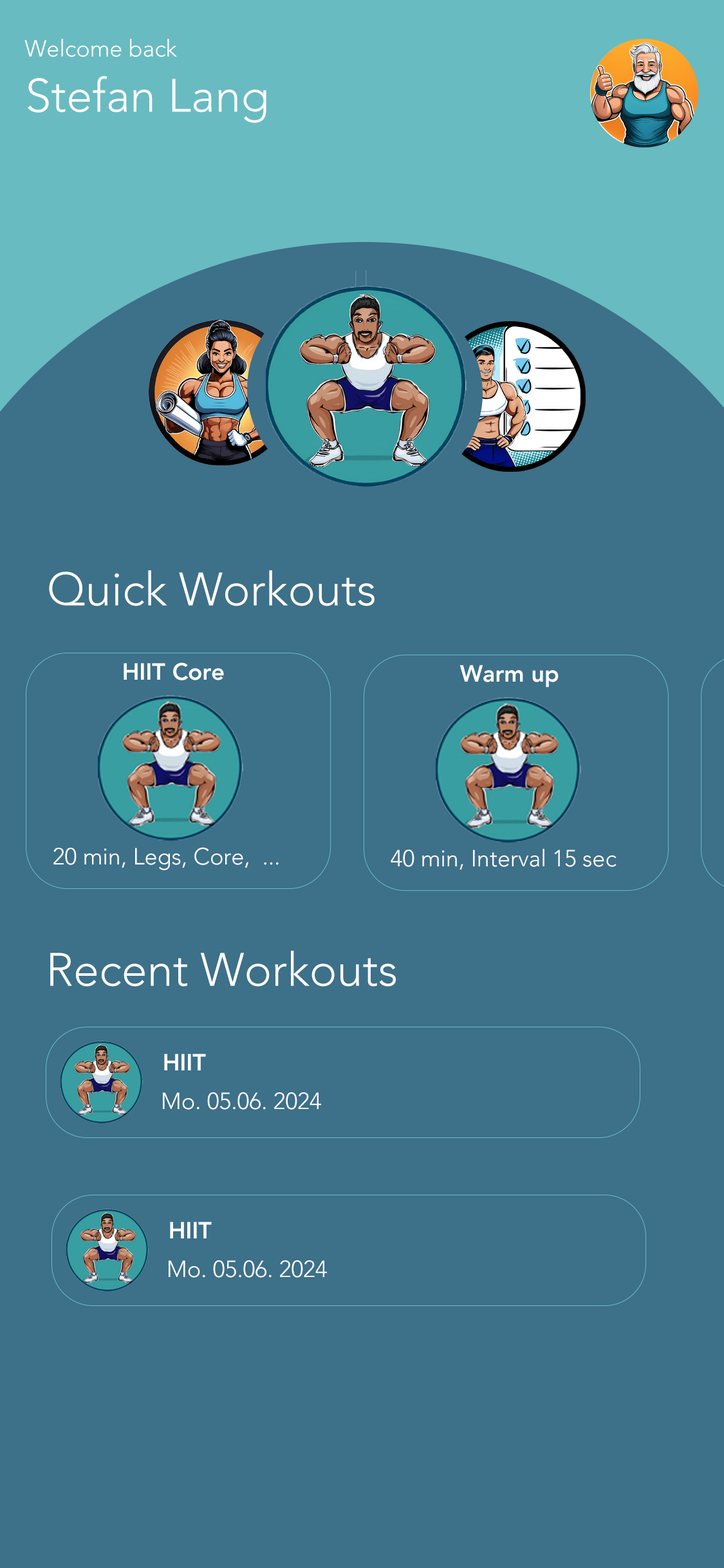
<style>
.page{position:relative;width:724px;height:1568px;background:#3d7089}
.page>*{position:absolute;margin:0}
.t1{font:23.2px "Avenir-Light";color:#ffffff}
.t2{font:46.3px "Avenir-Light";color:#ffffff}
.t3{font:23.2px "Avenir-Heavy";color:#ffffff}
</style>
<div class="page">
<p class="t1" style="left:24px;top:39px;width:153px;height:18px">Welcome back</p>
<p class="t2" style="left:28px;top:76px;width:238px;height:47px">Stefan Lang</p>
<p class="t2" style="left:49px;top:570px;width:326px;height:36px">Quick Workouts</p>
<p class="t3" style="left:124px;top:662px;width:100px;height:18px">HIIT Core</p>
<p class="t3" style="left:460px;top:665px;width:99px;height:22px">Warm up</p>
<p class="t1" style="left:53px;top:847px;width:226px;height:23px">20 min, Legs, Core,  ...</p>
<p class="t1" style="left:391px;top:848px;width:226px;height:22px">40 min, Interval 15 sec</p>
<p class="t2" style="left:50px;top:951px;width:346px;height:36px">Recent Workouts</p>
<p class="t3" style="left:164px;top:1054px;width:42px;height:16px">HIIT</p>
<p class="t1" style="left:163px;top:1092px;width:158px;height:18px">Mo. 05.06. 2024</p>
<p class="t3" style="left:170px;top:1222px;width:42px;height:16px">HIIT</p>
<p class="t1" style="left:169px;top:1260px;width:158px;height:18px">Mo. 05.06. 2024</p>
</div>
